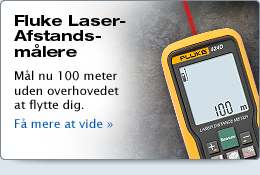
<style>
.page{position:relative;width:260px;height:175px}
.page>*{position:absolute;margin:0}
.t1{font:15px/15.5px "HelveticaNeueLTStd-BdEx";color:#000000}
.t2{font:12px "LucidaSans";color:#000000}
.t3{font:12px/14.4px "LucidaSans";color:#0058b3}
</style>
<div class="page">
<p class="t1" style="left:14px;top:15px;width:112px;height:42px">Fluke Laser- Afstands-<br>målere</p>
<p class="t2" style="left:14px;top:70px;width:105px;height:58px">Mål nu 100 meter <br>uden overhovedet <br>at flytte dig.<br><span class="t3">Få mere at vide »</span></p>
</div>
